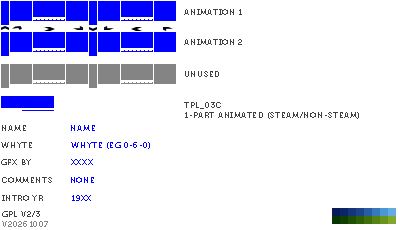
<style>
.page{position:relative;width:400px;height:230px;background:#ffffff}
.page>*{position:absolute;margin:0}
.t1{font:8px "Museo700-Regular";letter-spacing:0.075em;color:#404040;text-transform:uppercase}
.t2{font:8px "Museo700-Regular";letter-spacing:0.075em;color:#0000ff;text-transform:uppercase}
.t3{font:8px "Museo700-Regular";letter-spacing:0.075em;color:#848484;text-transform:uppercase}
</style>
<div class="page">
<p class="t1" style="left:184px;top:9px;width:58px;height:6px">animation 1</p>
<p class="t1" style="left:184px;top:39px;width:58px;height:6px">animation 2</p>
<p class="t1" style="left:185px;top:71px;width:34px;height:6px">UNUSED</p>
<p class="t1" style="left:184px;top:102px;width:175px;height:17px">tpl_03c<br>1-part animated (steam/non-steam)</p>
<p class="t1" style="left:2px;top:125px;width:24px;height:6px">name</p>
<p class="t2" style="left:71px;top:125px;width:24px;height:6px">name</p>
<p class="t1" style="left:1px;top:142px;width:31px;height:6px">whyte</p>
<p class="t2" style="left:71px;top:142px;width:79px;height:7px">whyte (eg 0-6-0)</p>
<p class="t1" style="left:1px;top:159px;width:30px;height:6px">gfx by</p>
<p class="t2" style="left:71px;top:159px;width:22px;height:6px">xxxx</p>
<p class="t1" style="left:2px;top:177px;width:50px;height:6px">comments</p>
<p class="t2" style="left:71px;top:177px;width:23px;height:6px">none</p>
<p class="t1" style="left:2px;top:195px;width:41px;height:6px">intro yr</p>
<p class="t2" style="left:72px;top:195px;width:19px;height:6px">19xx</p>
<p class="t3" style="left:2px;top:221px;width:46px;height:6px">v20261007</p>
<p class="t1" style="left:2px;top:211px;width:38px;height:6px">gpl v2/3</p>
</div>
